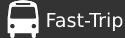
<style>
.page{position:relative;width:125px;height:38px;background:#333333}
.page>*{position:absolute;margin:0}
.t1{font:19.2px "DejaVuSans";color:#ffffff}
</style>
<div class="page">
<p class="t1" style="left:47px;top:12px;width:76px;height:19px">Fast-Trip</p>
</div>
